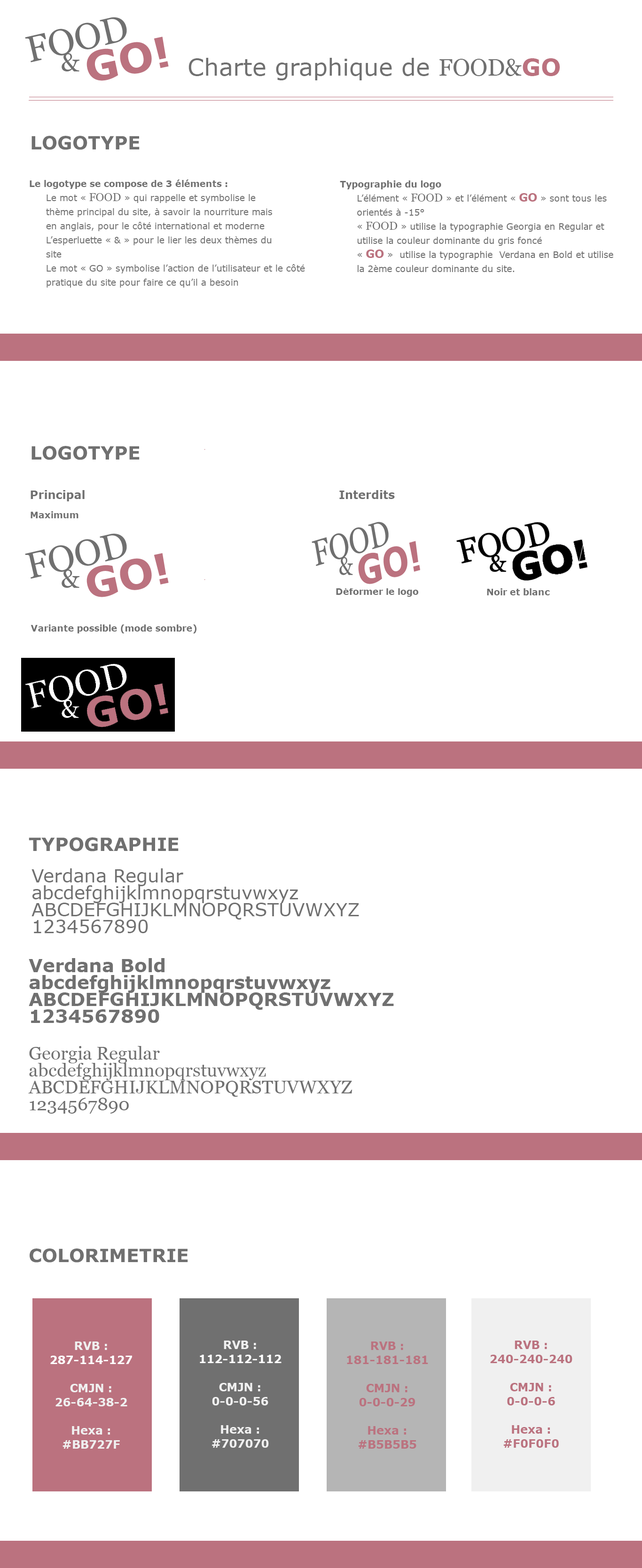
<style>
.page{position:relative;width:642px;height:1568px;background:#ffffff}
.page>*{position:absolute;margin:0}
.t1{font:23.5px "Verdana";color:#707070}
.t2{font:23.5px "Georgia";color:#707070}
.t3{font:23.5px "Verdana-Bold";color:#bb727f}
.t4{font:18.3px "Verdana-Bold";color:#707070}
.t5{font:8.9px/14.1px "Verdana";color:#707070}
.t6{font:8.9px/14.1px "Verdana-Bold";color:#707070}
.t7{font:11.3px/14.1px "Georgia";color:#707070}
.t8{font:11.3px/14.1px "Verdana-Bold";color:#bb727f}
.t9{font:11.3px "Verdana-Bold";color:#707070}
.t10{font:8.9px "Verdana-Bold";color:#707070}
.t11{font:18.3px/16.9px "Verdana";color:#707070}
.t12{font:18.3px/14.1px "Verdana";color:#707070}
.t13{font:18.3px/16.9px "Verdana-Bold";color:#707070}
.t14{font:18.3px/14.1px "Verdana-Bold";color:#707070}
.t15{font:18.3px/16.9px "Georgia";color:#707070}
.t16{font:18.3px/14.1px "Georgia";color:#707070}
.t17{font:11.3px/14.1px "Verdana-Bold";color:#f0f0f0}
.t18{font:11.3px/14.1px "Verdana-Bold";color:#ffffff}
</style>
<div class="page">
<p class="t1" style="left:188px;top:58px;width:372px;height:22px">Charte graphique de <span class="t2">FOOD&amp;</span><span class="t3">GO</span></p>
<p class="t4" style="left:31px;top:136px;width:109px;height:14px">LOGOTYPE</p>
<p class="t5" style="left:30px;top:179px;width:275px;height:109px"><span class="t6">Le logotype se compose de 3 éléments :<br></span> Le mot « <span class="t7">FOOD</span> » qui rappelle et symbolise le<br> thème principal du site, à savoir la nourriture mais<br> en anglais, pour le côté international et moderne<br> L’esperluette « &amp; » pour le lier les deux thèmes du<br> site<br> Le mot « GO » symbolise l’action de l’utilisateur et le côté<br> pratique du site pour faire ce qu’il a besoin</p>
<p class="t5" style="left:340px;top:180px;width:273px;height:92px"><span class="t6">Typographie du logo<br></span> L’élément « <span class="t7">FOOD</span> » et l’élément « <span class="t8">GO</span> » sont tous les<br> orientés à -15°<br> « <span class="t7">FOOD</span> » utilise la typographie Georgia en Regular et<br> utilise la couleur dominante du gris foncé<br> « <span class="t8">GO</span> »  utilise la typographie  Verdana en Bold et utilise<br> la 2ème couleur dominante du site.</p>
<p class="t4" style="left:31px;top:446px;width:109px;height:14px">LOGOTYPE</p>
<p class="t9" style="left:31px;top:490px;width:54px;height:11px">Principal</p>
<p class="t9" style="left:339px;top:490px;width:56px;height:9px">Interdits</p>
<p class="t10" style="left:31px;top:511px;width:47px;height:7px">Maximum</p>
<p class="t10" style="left:336px;top:587px;width:82px;height:10px">Déformer le logo</p>
<p class="t10" style="left:487px;top:588px;width:63px;height:7px">Noir et blanc</p>
<p class="t10" style="left:31px;top:624px;width:165px;height:9px">Variante possible (mode sombre)</p>
<p class="t4" style="left:29px;top:837px;width:150px;height:14px">TYPOGRAPHIE</p>
<p class="t11" style="left:31px;top:868px;width:328px;height:65px"><span class="t12">Verdana Regular<br></span>abcdefghijklmnopqrstuvwxyz<br>ABCDEFGHIJKLMNOPQRSTUVWXYZ<br>1234567890</p>
<p class="t13" style="left:29px;top:958px;width:365px;height:65px"><span class="t14">Verdana Bold<br></span>abcdefghijklmnopqrstuvwxyz<br>ABCDEFGHIJKLMNOPQRSTUVWXYZ<br>1234567890</p>
<p class="t15" style="left:28px;top:1046px;width:324px;height:68px"><span class="t16">Georgia Regular<br></span>abcdefghijklmnopqrstuvwxyz<br>ABCDEFGHIJKLMNOPQRSTUVWXYZ<br>1234567890</p>
<p class="t4" style="left:30px;top:1248px;width:158px;height:15px">COLORIMETRIE</p>
<p class="t17" style="left:50px;top:1342px;width:82px;height:107px;text-align:center">RVB :<br><span class="t18">287-114-127<br></span><br>CMJN :<br>26-64-38-2<br><br>Hexa :<br>#BB727F</p>
<p class="t17" style="left:200px;top:1341px;width:81px;height:107px;text-align:center">RVB :<br><span class="t18">112-112-112<br></span><br>CMJN :<br>0-0-0-56<br><br>Hexa :<br>#707070</p>
<p class="t8" style="left:347px;top:1342px;width:81px;height:107px;text-align:center">RVB :<br>181-181-181<br><br>CMJN :<br>0-0-0-29<br><br>Hexa :<br>#B5B5B5</p>
<p class="t8" style="left:490px;top:1341px;width:82px;height:107px;text-align:center">RVB :<br>240-240-240<br><br>CMJN :<br>0-0-0-6<br><br>Hexa :<br>#F0F0F0</p>
</div>
